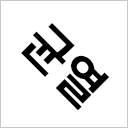
<style>
.page{position:relative;width:128px;height:128px;background:#ffffff}
.page>*{position:absolute;margin:0}
.t1{font:50px "NotoSansCJKkr-Bold";letter-spacing:-0.025em;color:#000000}
</style>
<div class="page">
<p class="t1" style="left:21px;top:23px;width:89px;height:88px;rotate:45deg">균열</p>
</div>
